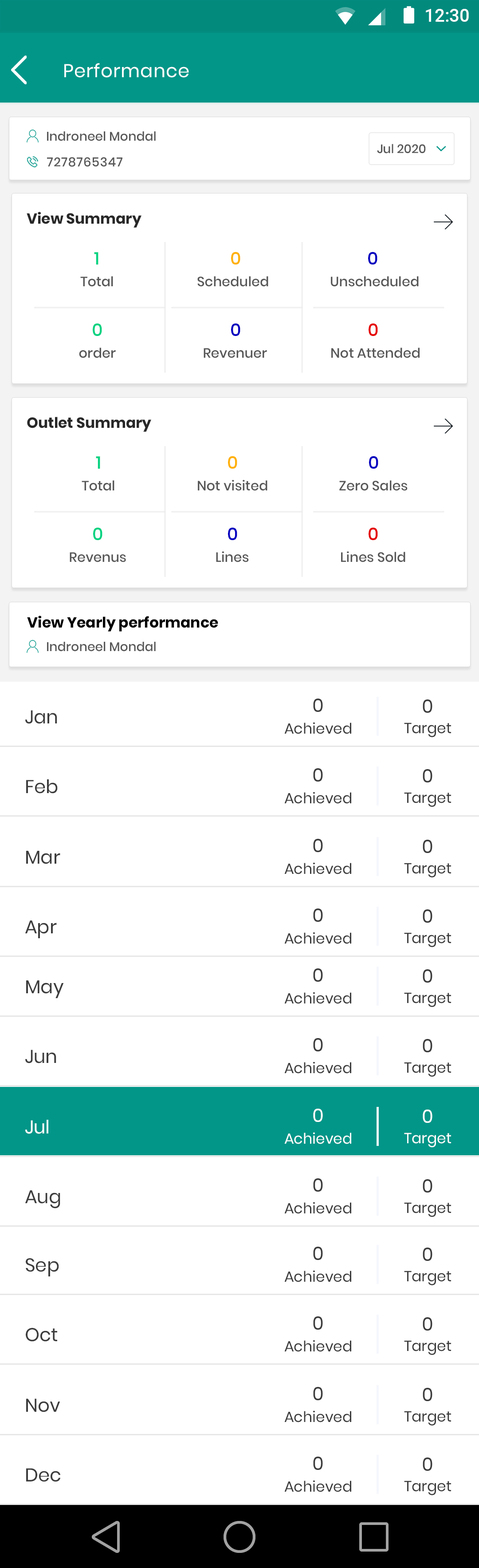
<style>
.page{position:relative;width:479px;height:1568px;background:#ffffff}
.page>*{position:absolute;margin:0}
.t1{font:18.3px "Roboto-Medium";color:#ffffff}
.t2{font:18.5px "Poppins-Regular";letter-spacing:0.025em;color:#ffffff}
.t3{font:12.6px "Poppins-Medium";color:#585858}
.t4{font:12.3px "Poppins-Medium";color:#585858}
.t5{font:12.3px "Poppins-Medium";color:#585858;text-transform:uppercase}
.t6{font:12.6px "Poppins-Medium";letter-spacing:0.04em;color:#585858}
.t7{font:14.6px "Poppins-Bold";color:#282828}
.t8{font:14.6px "Poppins-Bold";color:#282828;text-transform:uppercase}
.t9{font:17.5px "Poppins-Medium";color:#03d281}
.t10{font:17.5px "Poppins-Medium";color:#ffb109}
.t11{font:17.5px "Poppins-Medium";color:#0602c0}
.t12{font:13.5px "Poppins-Medium";color:#585858}
.t13{font:17.5px "Poppins-Medium";color:#e50404}
.t14{font:14.6px "Poppins-Bold";color:#000000}
.t15{font:18.6px "Poppins-Regular";color:#3c3c3c}
.t16{font:14.7px "Poppins-Regular";color:#3c3c3c}
.t17{font:18.6px "Poppins-Regular";color:#ffffff}
.t18{font:14.7px "Poppins-Regular";color:#ffffff}
</style>
<div class="page">
<p class="t1" style="left:426px;top:9px;width:43px;height:13px">12:30</p>
<p class="t2" style="left:64px;top:63px;width:125px;height:15px">Performance</p>
<p class="t3" style="left:47px;top:131px;width:109px;height:10px">Indroneel Mondal</p>
<p class="t4" style="left:377px;top:144px;width:49px;height:10px"><span class="t5">j</span>ul 2020</p>
<p class="t6" style="left:47px;top:157px;width:75px;height:10px">7278765347</p>
<p class="t7" style="left:27px;top:212px;width:115px;height:16px"><span class="t8">V</span>iew Summary</p>
<p class="t9" style="left:94px;top:252px;width:5px;height:13px">1</p>
<p class="t10" style="left:231px;top:252px;width:10px;height:13px">0</p>
<p class="t11" style="left:368px;top:252px;width:10px;height:13px">0</p>
<p class="t12" style="left:80px;top:276px;width:33px;height:11px">Total</p>
<p class="t12" style="left:197px;top:276px;width:72px;height:11px">Scheduled</p>
<p class="t12" style="left:331px;top:276px;width:88px;height:11px">Unscheduled</p>
<p class="t9" style="left:93px;top:323px;width:9px;height:13px">0</p>
<p class="t11" style="left:231px;top:323px;width:10px;height:13px">0</p>
<p class="t13" style="left:369px;top:323px;width:9px;height:13px">0</p>
<p class="t12" style="left:79px;top:348px;width:37px;height:10px">order</p>
<p class="t12" style="left:204px;top:348px;width:63px;height:10px">Revenuer</p>
<p class="t12" style="left:332px;top:348px;width:88px;height:10px">Not Attended</p>
<p class="t7" style="left:27px;top:417px;width:124px;height:15px"><span class="t8">O</span>utlet Summary</p>
<p class="t9" style="left:96px;top:456px;width:4px;height:13px">1</p>
<p class="t10" style="left:228px;top:456px;width:9px;height:13px">0</p>
<p class="t11" style="left:369px;top:456px;width:10px;height:13px">0</p>
<p class="t12" style="left:82px;top:480px;width:33px;height:11px">Total</p>
<p class="t12" style="left:198px;top:480px;width:70px;height:11px">Not visited</p>
<p class="t12" style="left:340px;top:480px;width:68px;height:11px">Zero Sales</p>
<p class="t9" style="left:93px;top:527px;width:10px;height:13px">0</p>
<p class="t11" style="left:228px;top:527px;width:9px;height:13px">0</p>
<p class="t13" style="left:369px;top:527px;width:9px;height:13px">0</p>
<p class="t12" style="left:70px;top:552px;width:56px;height:10px">Revenus</p>
<p class="t12" style="left:216px;top:551px;width:33px;height:11px">Lines</p>
<p class="t12" style="left:341px;top:551px;width:65px;height:11px">Lines Sold</p>
<p class="t14" style="left:27px;top:616px;width:191px;height:16px">View Yearly performance</p>
<p class="t3" style="left:47px;top:642px;width:109px;height:10px">Indroneel Mondal</p>
<p class="t15" style="left:313px;top:699px;width:10px;height:13px">0</p>
<p class="t15" style="left:423px;top:699px;width:10px;height:14px">0</p>
<p class="t15" style="left:25px;top:710px;width:32px;height:14px">Jan</p>
<p class="t16" style="left:284px;top:722px;width:68px;height:12px">Achieved</p>
<p class="t16" style="left:404px;top:723px;width:47px;height:14px">Target</p>
<p class="t15" style="left:313px;top:768px;width:10px;height:14px">0</p>
<p class="t15" style="left:423px;top:769px;width:10px;height:13px">0</p>
<p class="t15" style="left:26px;top:779px;width:32px;height:15px">Feb</p>
<p class="t16" style="left:284px;top:792px;width:68px;height:12px">Achieved</p>
<p class="t16" style="left:404px;top:792px;width:47px;height:15px">Target</p>
<p class="t15" style="left:313px;top:839px;width:10px;height:13px">0</p>
<p class="t15" style="left:423px;top:840px;width:10px;height:13px">0</p>
<p class="t15" style="left:26px;top:851px;width:34px;height:13px">Mar</p>
<p class="t16" style="left:284px;top:862px;width:68px;height:12px">Achieved</p>
<p class="t16" style="left:404px;top:863px;width:47px;height:14px">Target</p>
<p class="t15" style="left:313px;top:908px;width:10px;height:14px">0</p>
<p class="t15" style="left:423px;top:909px;width:10px;height:14px">0</p>
<p class="t15" style="left:25px;top:920px;width:32px;height:18px">Apr</p>
<p class="t16" style="left:284px;top:932px;width:68px;height:12px">Achieved</p>
<p class="t16" style="left:404px;top:932px;width:47px;height:15px">Target</p>
<p class="t15" style="left:313px;top:968px;width:10px;height:14px">0</p>
<p class="t15" style="left:423px;top:969px;width:10px;height:14px">0</p>
<p class="t15" style="left:26px;top:980px;width:38px;height:18px">May</p>
<p class="t16" style="left:284px;top:992px;width:68px;height:12px">Achieved</p>
<p class="t16" style="left:404px;top:992px;width:47px;height:15px">Target</p>
<p class="t15" style="left:25px;top:1050px;width:31px;height:13px">Jun</p>
<p class="t15" style="left:313px;top:1038px;width:10px;height:13px">0</p>
<p class="t15" style="left:423px;top:1039px;width:10px;height:13px">0</p>
<p class="t16" style="left:284px;top:1062px;width:68px;height:12px">Achieved</p>
<p class="t16" style="left:404px;top:1062px;width:47px;height:15px">Target</p>
<p class="t17" style="left:313px;top:1109px;width:10px;height:13px">0</p>
<p class="t17" style="left:423px;top:1110px;width:10px;height:13px">0</p>
<p class="t17" style="left:25px;top:1120px;width:23px;height:14px">Jul</p>
<p class="t18" style="left:284px;top:1132px;width:68px;height:12px">Achieved</p>
<p class="t18" style="left:404px;top:1133px;width:47px;height:14px">Target</p>
<p class="t15" style="left:313px;top:1178px;width:10px;height:14px">0</p>
<p class="t15" style="left:423px;top:1179px;width:10px;height:14px">0</p>
<p class="t15" style="left:25px;top:1190px;width:35px;height:19px">Aug</p>
<p class="t16" style="left:284px;top:1202px;width:68px;height:12px">Achieved</p>
<p class="t16" style="left:404px;top:1202px;width:47px;height:15px">Target</p>
<p class="t15" style="left:313px;top:1247px;width:10px;height:13px">0</p>
<p class="t15" style="left:423px;top:1248px;width:10px;height:13px">0</p>
<p class="t15" style="left:26px;top:1258px;width:33px;height:18px">Sep</p>
<p class="t16" style="left:284px;top:1270px;width:68px;height:12px">Achieved</p>
<p class="t16" style="left:404px;top:1271px;width:47px;height:14px">Target</p>
<p class="t15" style="left:313px;top:1316px;width:10px;height:14px">0</p>
<p class="t15" style="left:423px;top:1317px;width:10px;height:14px">0</p>
<p class="t15" style="left:26px;top:1328px;width:31px;height:14px">Oct</p>
<p class="t16" style="left:284px;top:1340px;width:68px;height:12px">Achieved</p>
<p class="t16" style="left:404px;top:1340px;width:47px;height:15px">Target</p>
<p class="t15" style="left:313px;top:1387px;width:10px;height:13px">0</p>
<p class="t15" style="left:423px;top:1388px;width:10px;height:13px">0</p>
<p class="t15" style="left:26px;top:1398px;width:34px;height:14px">Nov</p>
<p class="t16" style="left:284px;top:1410px;width:68px;height:12px">Achieved</p>
<p class="t16" style="left:404px;top:1411px;width:47px;height:15px">Target</p>
<p class="t15" style="left:313px;top:1457px;width:10px;height:13px">0</p>
<p class="t15" style="left:423px;top:1457px;width:10px;height:14px">0</p>
<p class="t15" style="left:26px;top:1468px;width:34px;height:14px">Dec</p>
<p class="t16" style="left:284px;top:1480px;width:68px;height:12px">Achieved</p>
<p class="t16" style="left:404px;top:1481px;width:47px;height:14px">Target</p>
</div>
